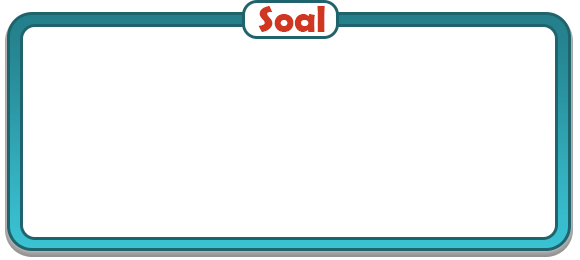
<style>
.page{position:relative;width:580px;height:260px;background:#ffffff}
.page>*{position:absolute;margin:0}
.t1{font:37.5px "BerlinSansFBDemi-Bold";color:#cf3721}
</style>
<div class="page">
<p class="t1" style="left:258px;top:6px;width:67px;height:26px">Soal</p>
</div>
